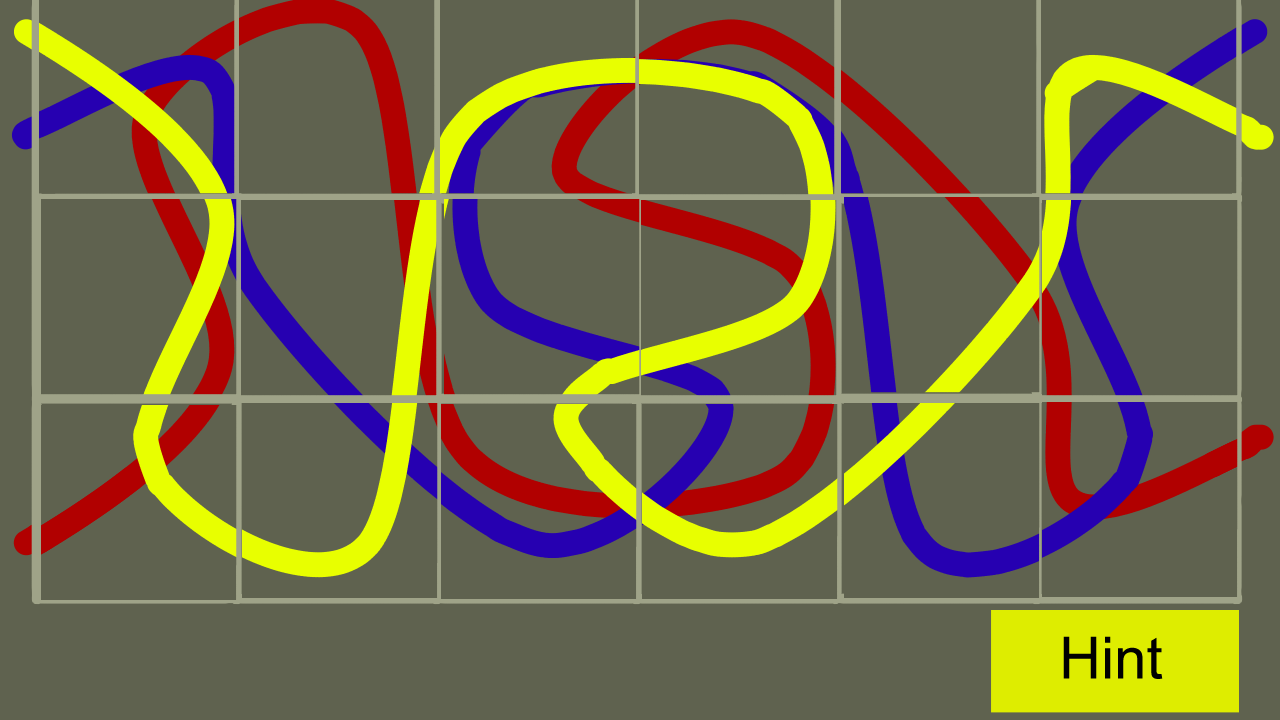
<style>
.page{position:relative;width:1280px;height:720px;background:#5f624f}
.page>*{position:absolute;margin:0}
.t1{font:58.3px "ArialMT";color:#000000}
</style>
<div class="page">
<p class="t1" style="left:1063px;top:636px;width:100px;height:43px">Hint</p>
</div>
